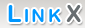
<style>
.page{position:relative;width:85px;height:28px}
.page>*{position:absolute;margin:0}
.t1{font:18px "ArialRoundedMTBold";letter-spacing:0.1em;color:#0097ff}
.t2{font:24px "ArialRoundedMTBold";letter-spacing:0.1em;color:#0097ff}
.t3{font:18px "ArialRoundedMTBold";letter-spacing:0.3em;color:#0097ff}
.t4{font:24px "ArialRoundedMTBold";color:#686e71}
</style>
<div class="page">
<p class="t1" style="left:8px;top:5px;width:73px;height:17px"><span class="t2">L</span>IN<span class="t3">K</span><span class="t4">X</span></p>
</div>
